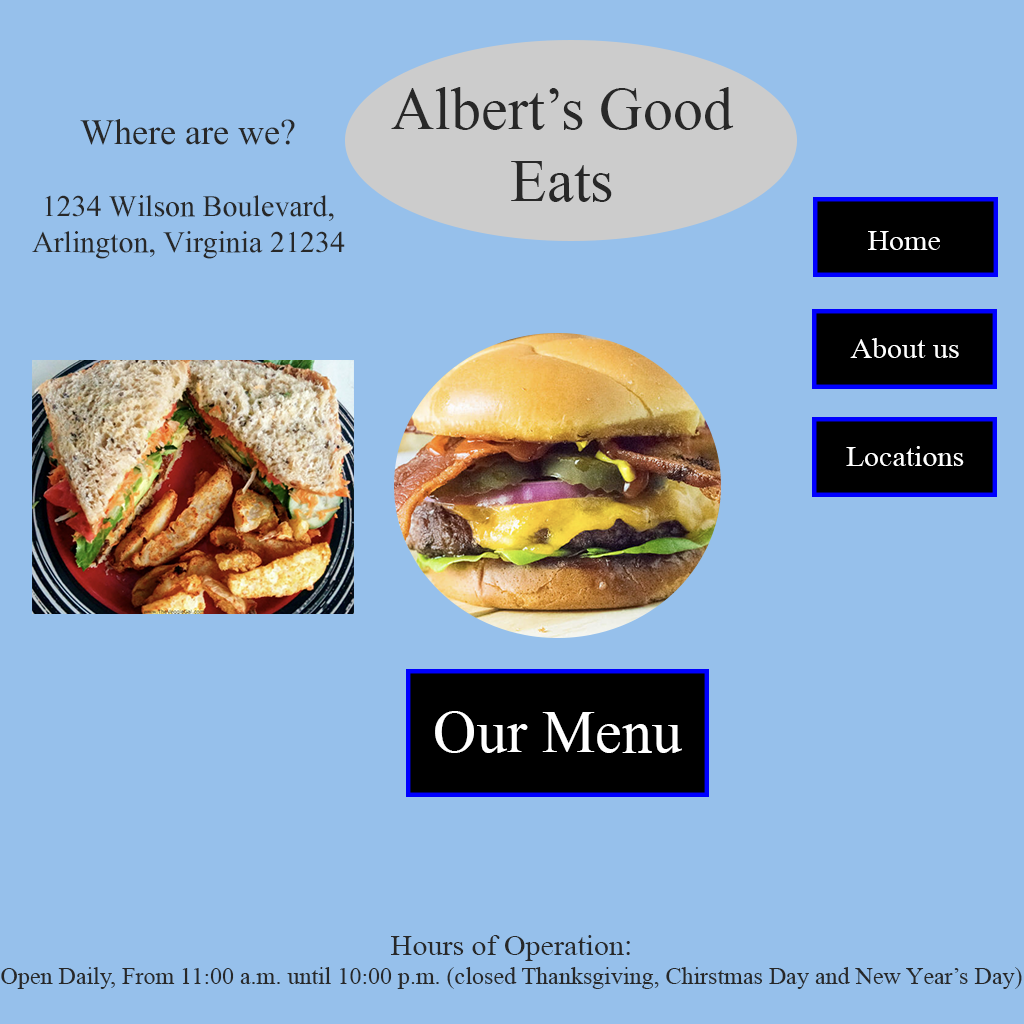
<style>
.page{position:relative;width:1024px;height:1024px;background:#96c0eb}
.page>*{position:absolute;margin:0}
.t1{font:60px "MongolianBaiti";color:#282828}
.t2{font:30px "MongolianBaiti";color:#282828}
.t3{font:36px "MongolianBaiti";color:#282828}
.t4{font:30px "MongolianBaiti";color:#ffffff}
.t5{font:60px "MongolianBaiti";color:#ffffff}
.t6{font:24px "MongolianBaiti";color:#282828}
</style>
<div class="page">
<p class="t1" style="left:391px;top:87px;width:343px;height:115px;text-align:center">Albert’s Good Eats</p>
<p class="t2" style="left:32px;top:119px;width:313px;height:140px;text-align:center"><span class="t3">Where are we?<br></span><br>1234 Wilson Boulevard, Arlington, Virginia 21234</p>
<p class="t4" style="left:868px;top:231px;width:72px;height:19px">Home</p>
<p class="t4" style="left:850px;top:338px;width:109px;height:20px">About us</p>
<p class="t4" style="left:846px;top:446px;width:118px;height:20px">Locations</p>
<p class="t5" style="left:435px;top:711px;width:247px;height:42px">Our Menu</p>
<p class="t6" style="left:1px;top:935px;width:1021px;height:54px;text-align:center"><span class="t2">Hours of Operation:<br></span>Open Daily, From 11:00 a.m. until 10:00 p.m. (closed Thanksgiving, Chirstmas Day and New Year’s Day)</p>
</div>
